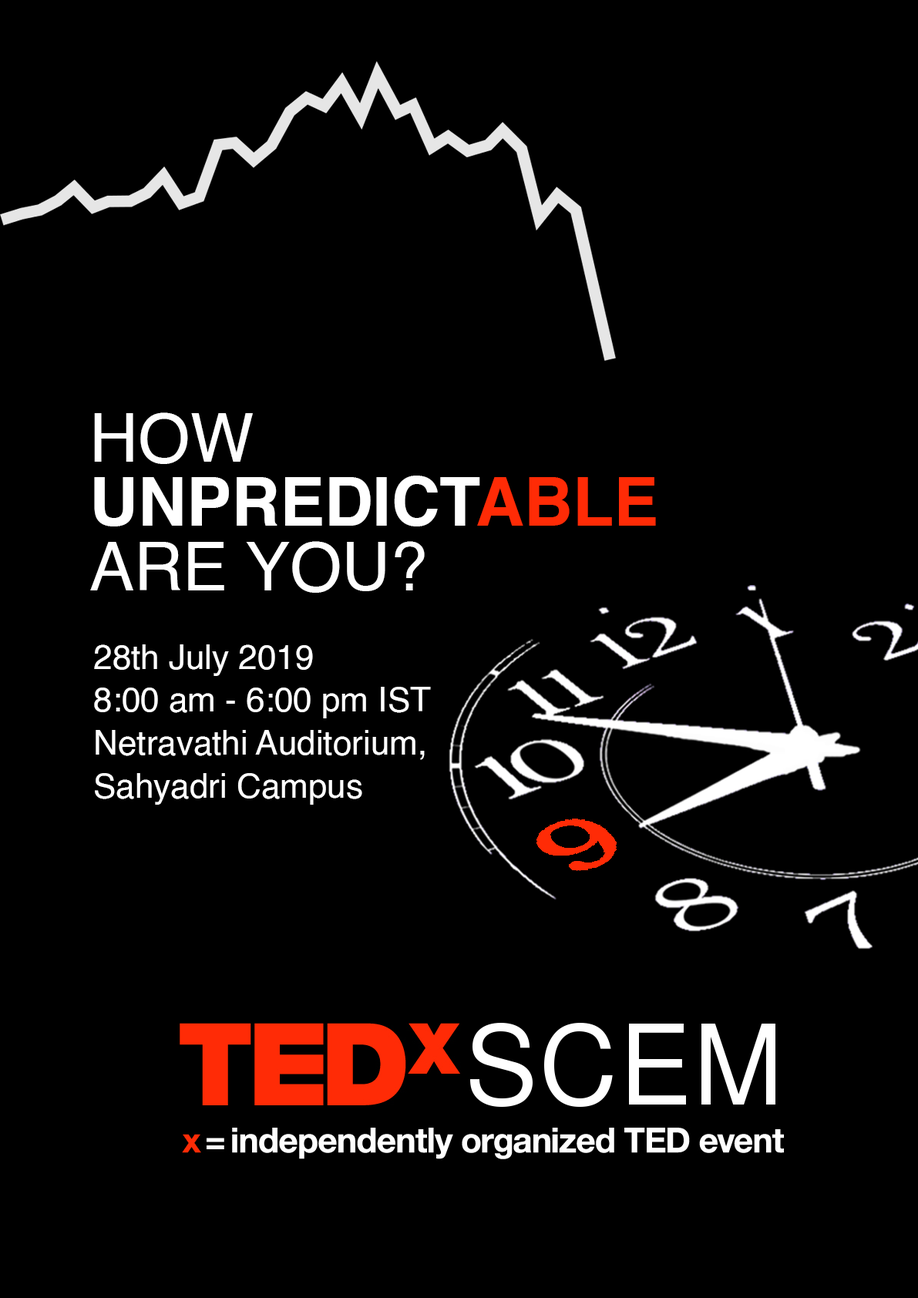
<style>
.page{position:relative;width:918px;height:1298px;background:#000000}
.page>*{position:absolute;margin:0}
.t1{font:67.1px/49px "Helvetica-Bold";color:#ffffff}
.t2{font:67.1px/49px "Helvetica";color:#fefefe}
.t3{font:67.1px/49px "Helvetica-Bold";color:#ff2b06}
.t4{font:33.9px/49px "Helvetica";color:#ffffff}
</style>
<div class="page">
<p class="t1" style="left:90px;top:413px;width:566px;height:180px"><span class="t2">HOW <br></span>UNPREDICT<span class="t3">ABLE <br></span><span class="t2">ARE YOU?</span></p>
<p class="t4" style="left:94px;top:645px;width:337px;height:160px">28th July 2019<br>8:00 am - 6:00 pm IST<br>Netravathi Auditorium,<br>Sahyadri Campus</p>
</div>
